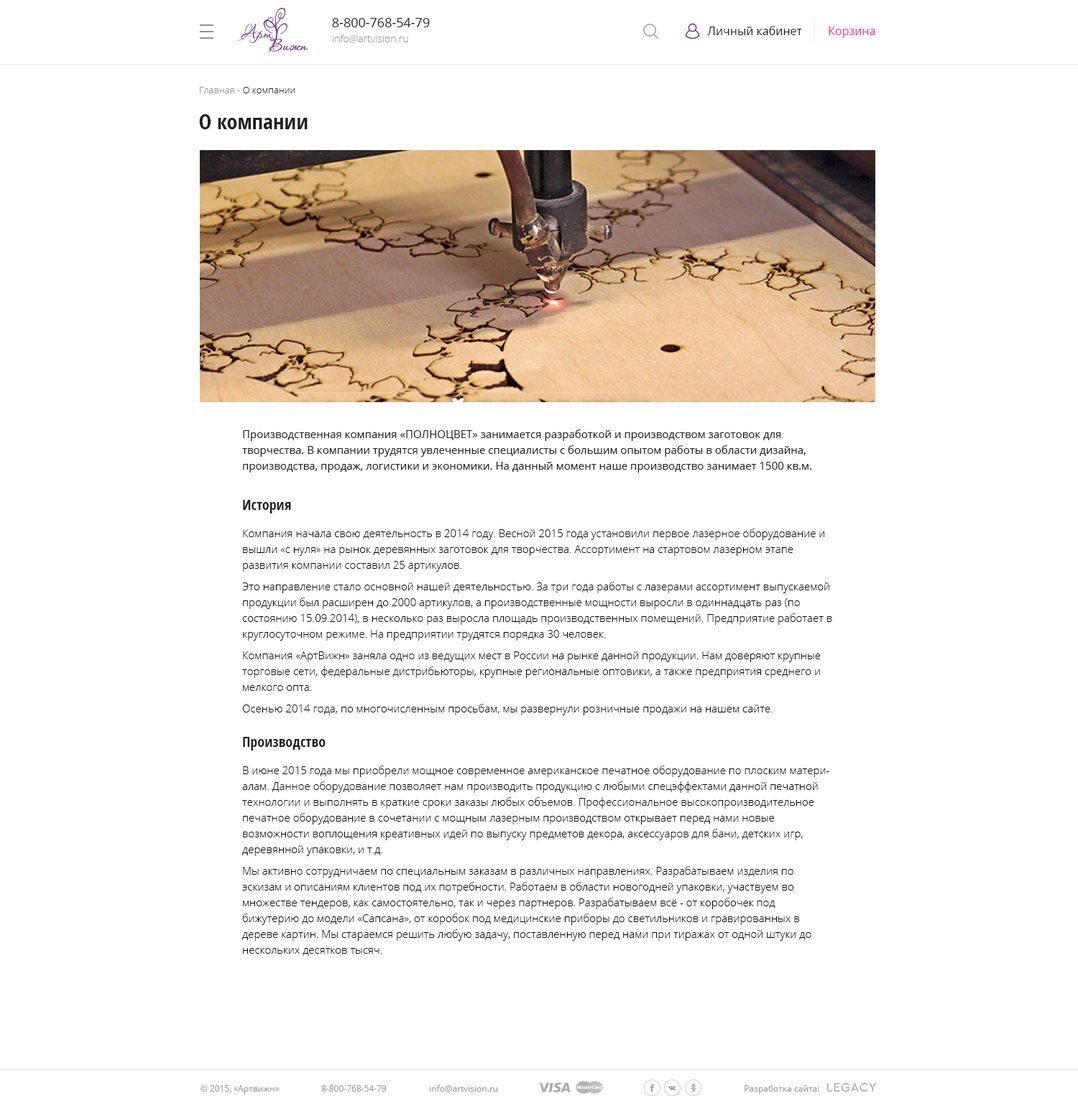
<style>
.page{position:relative;width:1078px;height:1106px;background:#ffffff}
.page>*{position:absolute;margin:0}
.t1{font:12.9px "OpenSans";color:#202020}
.t2{font:11.5px "OpenSans";color:#202020}
.t3{font:11.5px "OpenSans";color:#e233a6}
.t4{font:10.1px "OpenSans-Light";color:#999999}
.t5{font:9.3px "OpenSans-Light";color:#202020}
.t6{font:9.3px "OpenSans-Light";color:#939393}
.t7{font:21.6px "OpenSans-CondensedBold";color:#202020}
.t8{font:10.8px/15.8px "OpenSans";color:#202020}
.t9{font:14.4px "OpenSans-CondensedBold";color:#202020}
.t10{font:10.8px/15.8px "OpenSans-Light";color:#000000}
.t11{font:10.8px/21.6px "OpenSans-Light";color:#000000}
.t12{font:8.6px "OpenSans";color:#9e9d9d}
</style>
<div class="page">
<p class="t1" style="left:332px;top:18px;width:98px;height:9px">8-800-768-54-79</p>
<p class="t2" style="left:707px;top:26px;width:95px;height:9px">Личный кабинет</p>
<p class="t3" style="left:828px;top:27px;width:47px;height:11px">Корзина</p>
<p class="t4" style="left:333px;top:34px;width:75px;height:9px">info@artvision.ru</p>
<p class="t5" style="left:200px;top:87px;width:95px;height:6px"><span class="t6">Главная - </span>О компании</p>
<p class="t7" style="left:199px;top:114px;width:109px;height:15px">О компании</p>
<p class="t8" style="left:242px;top:430px;width:569px;height:43px">Производственная компания «ПОЛНОЦВЕТ» занимается разработкой и производством заготовок для <br>творчества. В компании трудятся увлеченные специалисты с большим опытом работы в области дизайна, <br>производства, продаж, логистики и экономики. На данный момент наше производство занимает 1500 кв.м.</p>
<p class="t9" style="left:243px;top:500px;width:48px;height:14px">История</p>
<p class="t10" style="left:242px;top:529px;width:590px;height:187px">Компания начала свою деятельность в 2014 году. Весной 2015 года установили первое лазерное оборудование и вышли «с нуля» на рынок деревянных заготовок для творчества. Ассортимент на стартовом лазерном этапе <br>развития компании составил 25 артикулов. <br><span class="t11">Это направление стало основной нашей деятельностью. За три года работы с лазерами ассортимент выпускаемой </span>продукции был расширен до 2000 артикулов, а производственные мощности выросли в одиннадцать раз (по состоянию 15.09.2014), в несколько раз выросла площадь производственных помещений. Предприятие работает в круглосуточном режиме. На предприятии трудятся порядка 30 человек.<br><span class="t11">Компания «АртВижн» заняла одно из ведущих мест в России на рынке данной продукции. Нам доверяют крупные </span>торговые сети, федеральные дистрибьюторы, крупные региональные оптовики, а также предприятия среднего и мелкого опта.<br><span class="t11">Осенью 2014 года, по многочисленным просьбам, мы развернули розничные продажи на нашем сайте.</span></p>
<p class="t9" style="left:243px;top:737px;width:82px;height:14px">Производство</p>
<p class="t10" style="left:242px;top:766px;width:587px;height:190px">В июне 2015 года мы приобрели мощное современное американское печатное оборудование по плоским материалам. Данное оборудование позволяет нам производить продукцию с любыми спецэффектами данной печатной технологии и выполнять в краткие сроки заказы любых объемов. Профессиональное высокопроизводительное печатное оборудование в сочетании с мощным лазерным производством открывает перед нами новые <br>возможности воплощения креативных идей по выпуску предметов декора, аксессуаров для бани, детских игр, <br>деревянной упаковки, и т.д. <br><span class="t11">Мы активно сотрудничаем по специальным заказам в различных направлениях. Разрабатываем изделия по <br></span>эскизам и описаниям клиентов под их потребности. Работаем в области новогодней упаковки, участвуем во <br>множестве тендеров, как самостоятельно, так и через партнеров. Разрабатываем всё - от коробочек под <br>бижутерию до модели «Сапсана», от коробок под медицинские приборы до светильников и гравированных в дереве картин. Мы стараемся решить любую задачу, поставленную перед нами при тиражах от одной штуки до нескольких десятков тысяч.</p>
<p class="t12" style="left:200px;top:1086px;width:79px;height:8px">© 2015, «Артвижн»</p>
<p class="t12" style="left:321px;top:1086px;width:66px;height:6px">8-800-768-54-79</p>
<p class="t12" style="left:429px;top:1086px;width:69px;height:7px">info@artvision.ru</p>
<p class="t12" style="left:744px;top:1086px;width:75px;height:8px">Разработка сайта:</p>
</div>
